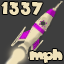
<style>
.page{position:relative;width:64px;height:64px;background:#3e3e3e}
.page>*{position:absolute;margin:0}
.t1{font:12.5px "akaDylanPlain";color:#efe1ba}
</style>
<div class="page">
<p class="t1" style="left:1px;top:2px;width:42px;height:13px">1 3 3 7</p>
<p class="t1" style="left:29px;top:49px;width:34px;height:14px">mph</p>
</div>
